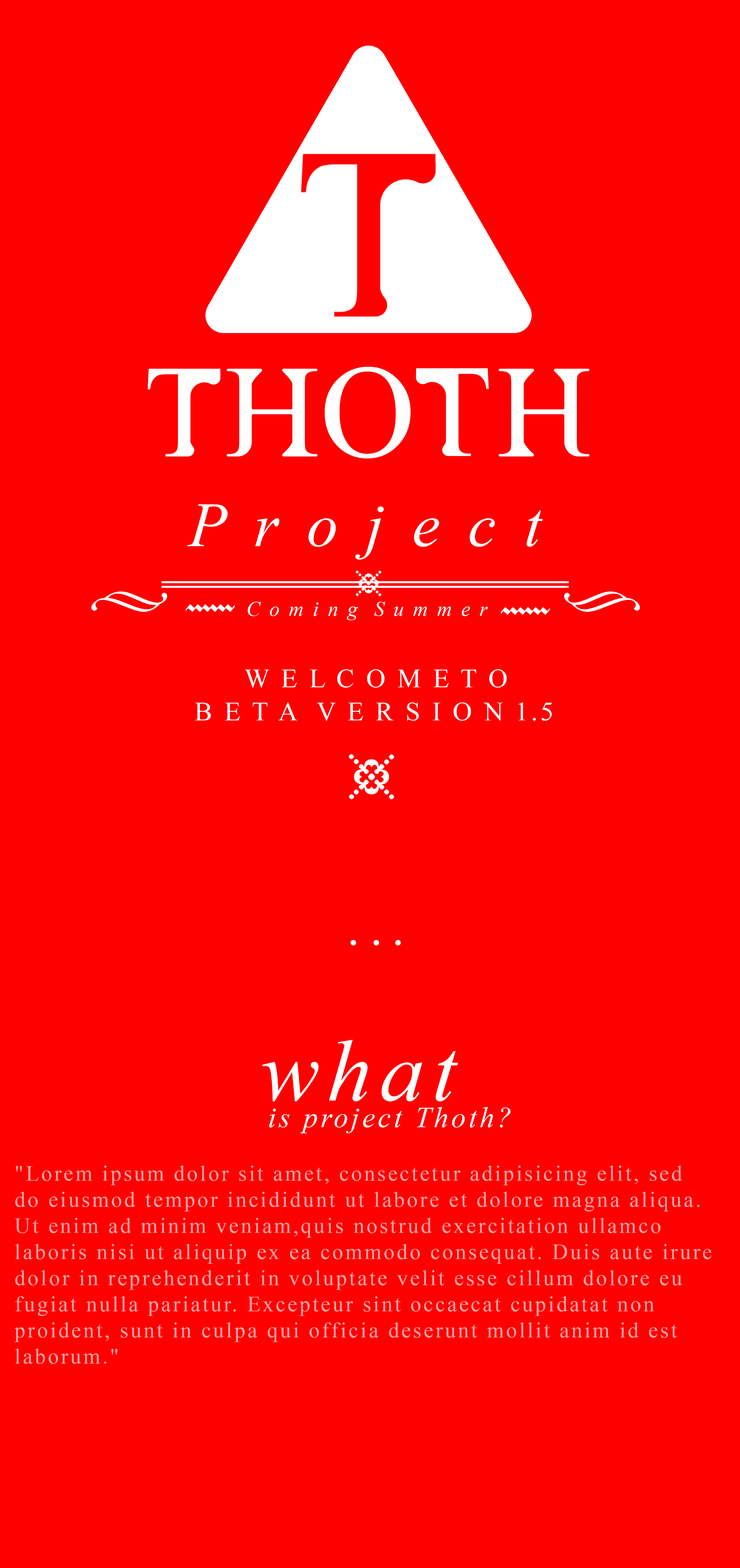
<style>
.page{position:relative;width:740px;height:1568px;background:#ff0000}
.page>*{position:absolute;margin:0}
.t1{font:62.9px "TimesNewRomanPS-ItalicMT";letter-spacing:0.1em;color:#ffffff}
.t2{font:20.6px "TimesNewRomanPS-ItalicMT";letter-spacing:0.1em;color:#ffffff}
.t3{font:26.6px "TimesNewRomanPSMT";letter-spacing:0.1em;color:#ffffff}
.t4{font:87.1px "TimesNewRomanPS-ItalicMT";letter-spacing:0.1em;color:#ffffff}
.t5{font:29px "TimesNewRomanPS-ItalicMT";letter-spacing:0.1em;color:#ffffff}
.t6{font:21.8px "TimesNewRomanPSMT";letter-spacing:0.1em;color:#ffa5a5}
</style>
<div class="page">
<p class="t1" style="left:187px;top:504px;width:356px;height:56px">P r o j e c t</p>
<p class="t2" style="left:248px;top:602px;width:240px;height:18px">C o m i n g  S u m m e r</p>
<p class="t3" style="left:245px;top:669px;width:262px;height:19px">W E L C O M E T O</p>
<p class="t3" style="left:195px;top:702px;width:357px;height:19px">B E T A  V E R S I O N 1.5</p>
<p class="t4" style="left:262px;top:1040px;width:196px;height:61px">what</p>
<p class="t5" style="left:269px;top:1107px;width:242px;height:26px">is project Thoth?</p>
<p class="t6" style="left:14px;top:1166px;width:698px;height:198px">"Lorem ipsum dolor sit amet, consectetur adipisicing elit, sed <br>do eiusmod tempor incididunt ut labore et dolore magna aliqua.<br>Ut enim ad minim veniam,quis nostrud exercitation ullamco<br>laboris nisi ut aliquip ex ea commodo consequat. Duis aute irure <br>dolor in reprehenderit in voluptate velit esse cillum dolore eu <br>fugiat nulla pariatur. Excepteur sint occaecat cupidatat non <br>proident, sunt in culpa qui officia deserunt mollit anim id est<br>laborum."</p>
</div>
